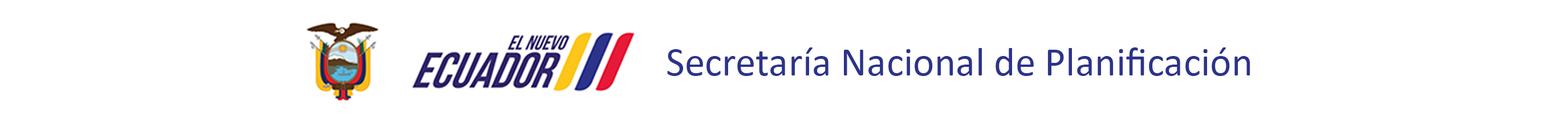
<style>
.page{position:relative;width:1568px;height:124px;background:#ffffff}
.page>*{position:absolute;margin:0}
.t1{font:40.7px "Calibri";color:#2c338a}
</style>
<div class="page">
<p class="t1" style="left:667px;top:47px;width:583px;height:29px">Secretaría Nacional de Planificación</p>
</div>
